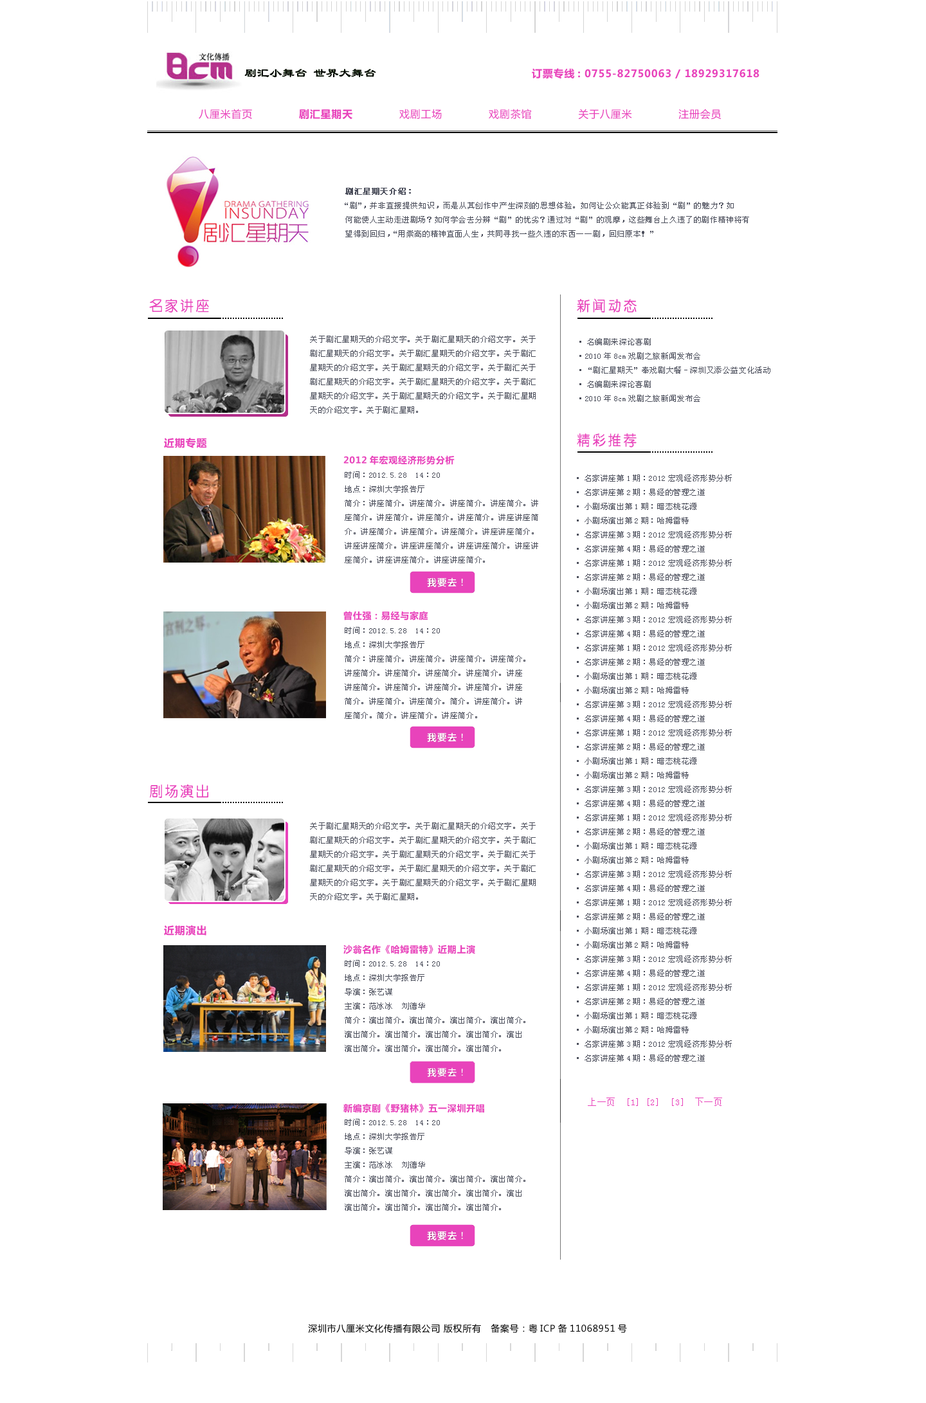
<style>
.page{position:relative;width:926px;height:1403px;background:#ffffff}
.page>*{position:absolute;margin:0}
.t1{font:10.3px "MicrosoftYaHei";letter-spacing:0.05em;color:#e843bb}
.t2{font:7.7px/14.1px "SimSun";letter-spacing:0.05em;color:#4b4e5b}
.t3{font:7.7px/14.1px "SimSun";letter-spacing:0.05em;color:#4b4e5b;font-weight:bold}
.t4{font:9px "MicrosoftYaHei";letter-spacing:0.05em;color:#e843bb}
.t5{font:9px "SimSun";letter-spacing:0.05em;color:#e843bb}
.t6{font:9px "MicrosoftYaHei";letter-spacing:0.05em;color:#000000}
</style>
<div class="page">
<p class="t1" style="left:532px;top:68px;width:227px;height:11px">订票专线: 0755-82750063 / 18929317618</p>
<p class="t1" style="left:199px;top:109px;width:522px;height:11px">八厘米首页             剧汇星期天             戏剧工场             戏剧茶馆             关于八厘米             注册会员</p>
<p class="t2" style="left:345px;top:188px;width:404px;height:49px"><span class="t3">剧汇星期天介绍：<br></span>“剧”，并非直接提供知识，而是从其创作中产生深刻的思想体验。如何让公众能真正体验到“剧”的魅力？如<br>何能使人主动走进剧场？如何学会去分辨“剧”的优劣？通过对“剧”的观摩，这些舞台上久违了的剧作精神将有<br>望得到回归，“用崇高的精神直面人生，共同寻找一些久违的东西——剧，回归原本！”</p>
<p class="t2" style="left:310px;top:336px;width:226px;height:77px">关于剧汇星期天的介绍文字。关于剧汇星期天的介绍文字。关于<br>剧汇星期天的介绍文字。关于剧汇星期天的介绍文字。关于剧汇<br>星期天的介绍文字。关于剧汇星期天的介绍文字。关于剧汇关于<br>剧汇星期天的介绍文字。关于剧汇星期天的介绍文字。关于剧汇<br>星期天的介绍文字。关于剧汇星期天的介绍文字。关于剧汇星期<br>天的介绍文字。关于剧汇星期。</p>
<p class="t2" style="left:579px;top:338px;width:191px;height:64px">·名编剧来深论喜剧<br>·2010年8cm戏剧之旅新闻发布会<br>·“剧汇星期天”奉戏剧大餐-深圳又添公益文化活动<br>·名编剧来深论喜剧<br>·2010年8cm戏剧之旅新闻发布会</p>
<p class="t1" style="left:164px;top:438px;width:43px;height:10px">近期专题</p>
<p class="t4" style="left:343px;top:455px;width:112px;height:10px">2012年宏观经济形势分析</p>
<p class="t2" style="left:345px;top:471px;width:193px;height:92px">时间：2012.5.28  14：20<br>地点：深圳大学报告厅<br>简介：讲座简介。讲座简介。讲座简介。讲座简介。讲<br>座简介。讲座简介。讲座简介。讲座简介。讲座讲座简<br>介。讲座简介。讲座简介。讲座简介。讲座讲座简介。<br>讲座讲座简介。讲座讲座简介。讲座讲座简介。讲座讲<br>座简介。讲座讲座简介。讲座讲座简介。</p>
<p class="t2" style="left:577px;top:474px;width:155px;height:587px">·名家讲座第1期：2012宏观经济形势分析<br>·名家讲座第2期：易经的管理之道<br>·小剧场演出第1期：暗恋桃花源<br>·小剧场演出第2期：哈姆雷特<br>·名家讲座第3期：2012宏观经济形势分析<br>·名家讲座第4期：易经的管理之道<br>·名家讲座第1期：2012宏观经济形势分析<br>·名家讲座第2期：易经的管理之道<br>·小剧场演出第1期：暗恋桃花源<br>·小剧场演出第2期：哈姆雷特<br>·名家讲座第3期：2012宏观经济形势分析<br>·名家讲座第4期：易经的管理之道<br>·名家讲座第1期：2012宏观经济形势分析<br>·名家讲座第2期：易经的管理之道<br>·小剧场演出第1期：暗恋桃花源<br>·小剧场演出第2期：哈姆雷特<br>·名家讲座第3期：2012宏观经济形势分析<br>·名家讲座第4期：易经的管理之道<br>·名家讲座第1期：2012宏观经济形势分析<br>·名家讲座第2期：易经的管理之道<br>·小剧场演出第1期：暗恋桃花源<br>·小剧场演出第2期：哈姆雷特<br>·名家讲座第3期：2012宏观经济形势分析<br>·名家讲座第4期：易经的管理之道<br>·名家讲座第1期：2012宏观经济形势分析<br>·名家讲座第2期：易经的管理之道<br>·小剧场演出第1期：暗恋桃花源<br>·小剧场演出第2期：哈姆雷特<br>·名家讲座第3期：2012宏观经济形势分析<br>·名家讲座第4期：易经的管理之道<br>·名家讲座第1期：2012宏观经济形势分析<br>·名家讲座第2期：易经的管理之道<br>·小剧场演出第1期：暗恋桃花源<br>·小剧场演出第2期：哈姆雷特<br>·名家讲座第3期：2012宏观经济形势分析<br>·名家讲座第4期：易经的管理之道<br>·名家讲座第1期：2012宏观经济形势分析<br>·名家讲座第2期：易经的管理之道<br>·小剧场演出第1期：暗恋桃花源<br>·小剧场演出第2期：哈姆雷特<br>·名家讲座第3期：2012宏观经济形势分析<br>·名家讲座第4期：易经的管理之道</p>
<p class="t4" style="left:343px;top:611px;width:85px;height:9px">曾仕强：易经与家庭</p>
<p class="t2" style="left:345px;top:627px;width:180px;height:92px">时间：2012.5.28  14：20<br>地点：深圳大学报告厅<br>简介：讲座简介。讲座简介。讲座简介。讲座简介。<br>讲座简介。讲座简介。讲座简介。讲座简介。讲座<br>讲座简介。讲座简介。讲座简介。讲座简介。讲座<br>简介。讲座简介。讲座简介。简介。讲座简介。讲<br>座简介。简介。讲座简介。讲座简介。</p>
<p class="t2" style="left:310px;top:822px;width:226px;height:78px">关于剧汇星期天的介绍文字。关于剧汇星期天的介绍文字。关于<br>剧汇星期天的介绍文字。关于剧汇星期天的介绍文字。关于剧汇<br>星期天的介绍文字。关于剧汇星期天的介绍文字。关于剧汇关于<br>剧汇星期天的介绍文字。关于剧汇星期天的介绍文字。关于剧汇<br>星期天的介绍文字。关于剧汇星期天的介绍文字。关于剧汇星期<br>天的介绍文字。关于剧汇星期。</p>
<p class="t1" style="left:164px;top:925px;width:42px;height:10px">近期演出</p>
<p class="t4" style="left:343px;top:944px;width:132px;height:10px">沙翁名作《哈姆雷特》近期上演</p>
<p class="t2" style="left:345px;top:960px;width:180px;height:92px">时间：2012.5.28  14：20<br>地点：深圳大学报告厅<br>导演：张艺谋<br>主演：范冰冰  刘德华<br>简介：演出简介。演出简介。演出简介。演出简介。<br>演出简介。演出简介。演出简介。演出简介。演出<br>演出简介。演出简介。演出简介。演出简介。</p>
<p class="t5" style="left:588px;top:1097px;width:134px;height:9px">上一页　[1] [2]  [3]  下一页</p>
<p class="t4" style="left:343px;top:1103px;width:141px;height:10px">新编京剧《野猪林》五一深圳开唱</p>
<p class="t2" style="left:345px;top:1119px;width:180px;height:92px">时间：2012.5.28  14：20<br>地点：深圳大学报告厅<br>导演：张艺谋<br>主演：范冰冰  刘德华<br>简介：演出简介。演出简介。演出简介。演出简介。<br>演出简介。演出简介。演出简介。演出简介。演出<br>演出简介。演出简介。演出简介。演出简介。</p>
<p class="t6" style="left:308px;top:1324px;width:319px;height:9px">深圳市八厘米文化传播有限公司 版权所有   备案号：粤ICP备11068951号</p>
</div>
